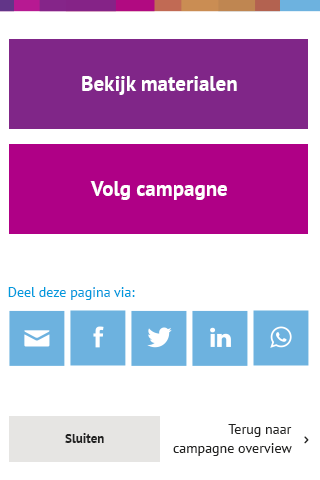
<style>
.page{position:relative;width:320px;height:480px;background:#ffffff}
.page>*{position:absolute;margin:0}
.t1{font:21px "PTSans-Bold";color:#ffffff}
.t2{font:14px "PTSans-Regular";color:#009add}
.t3{font:14px/19px "PTSans-Regular";color:#222221}
.t4{font:13px "PTSans-Bold";color:#222222}
</style>
<div class="page">
<p class="t1" style="left:82px;top:76px;width:155px;height:19px">Bekijk materialen</p>
<p class="t1" style="left:90px;top:181px;width:137px;height:19px">Volg campagne</p>
<p class="t2" style="left:8px;top:287px;width:127px;height:13px">Deel deze pagina via:</p>
<p class="t3" style="left:173px;top:424px;width:119px;height:32px;text-align:right">Terug naar<br>campagne overview</p>
<p class="t4" style="left:65px;top:433px;width:39px;height:10px">Sluiten</p>
</div>
